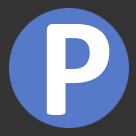
<style>
.page{position:relative;width:136px;height:136px;background:#5679ca}
.page>*{position:absolute;margin:0}
.t1{font:144px "Calibri-Bold";color:#ffffff}
</style>
<div class="page">
<p class="t1" style="left:46px;top:24px;width:64px;height:91px">P</p>
</div>
